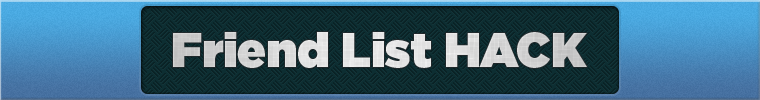
<style>
.page{position:relative;width:760px;height:100px}
.page>*{position:absolute;margin:0}
.t1{font:48px "GothamHTF-Ultra";color:#dadada}
</style>
<div class="page">
<p class="t1" style="left:173px;top:32px;width:414px;height:36px">Friend List HACK</p>
</div>
